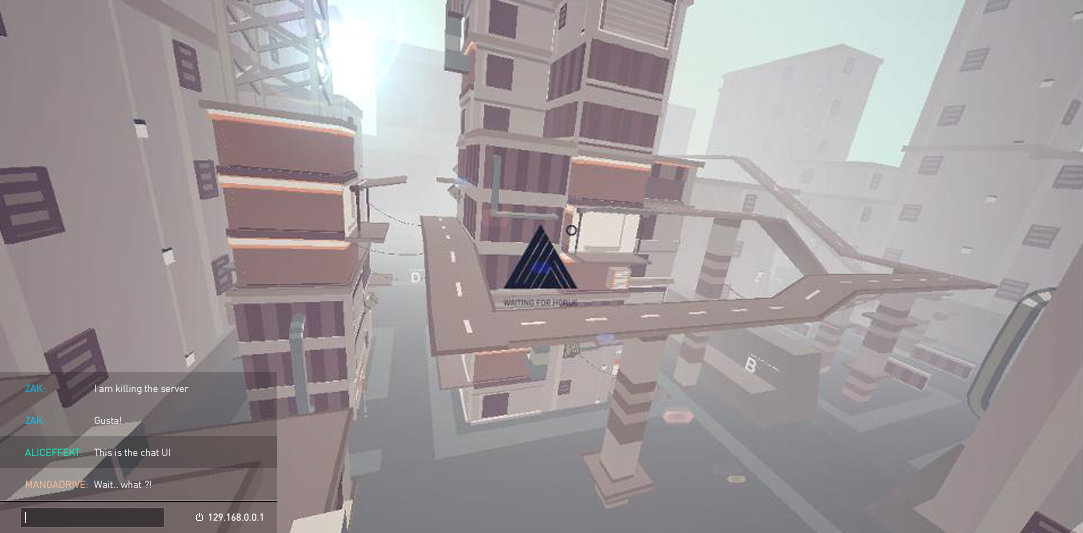
<style>
.page{position:relative;width:1083px;height:533px}
.page>*{position:absolute;margin:0}
.t1{font:10px "DIN";letter-spacing:-0.01em}
.t2{font:10px "DIN";letter-spacing:-0.01em;color:#ffffff}
.t3{font:10px "DIN";letter-spacing:-0.01em;color:#00ffcc}
.t4{font:10px "DIN";letter-spacing:-0.01em;color:#ffc09a}
</style>
<div class="page">
<p class="t1" style="left:25px;top:384px;width:20px;height:8px">ZAK:</p>
<p class="t2" style="left:95px;top:384px;width:94px;height:11px">I am killing the server</p>
<p class="t1" style="left:25px;top:416px;width:20px;height:8px">ZAK:</p>
<p class="t1" style="left:94px;top:416px;width:27px;height:8px">Gusta!</p>
<p class="t3" style="left:25px;top:448px;width:58px;height:8px">ALICEFFEKT:</p>
<p class="t2" style="left:94px;top:448px;width:76px;height:8px">This is the chat UI</p>
<p class="t4" style="left:26px;top:480px;width:62px;height:8px">MANGADRIVE:</p>
<p class="t2" style="left:94px;top:480px;width:57px;height:8px">Wait.. what ?!</p>
<p class="t2" style="left:209px;top:513px;width:54px;height:8px">129.168.0.0.1</p>
</div>
